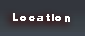
<style>
.page{position:relative;width:85px;height:36px;background:#33363d}
.page>*{position:absolute;margin:0}
.t1{font:10px "HeliosBlack";letter-spacing:0.14em;color:#ffffff}
</style>
<div class="page">
<p class="t1" style="left:13px;top:13px;width:57px;height:9px">Location</p>
</div>
